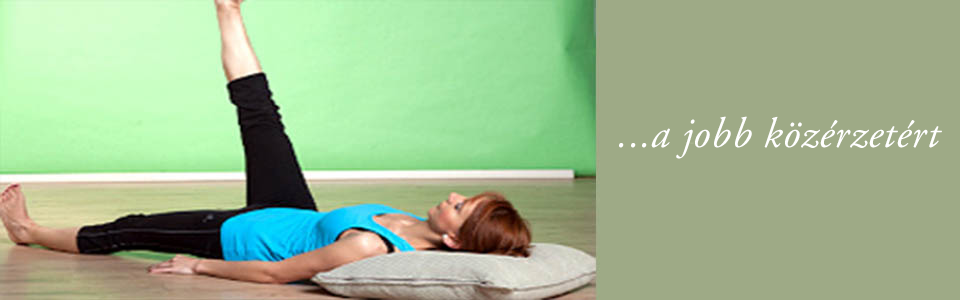
<style>
.page{position:relative;width:960px;height:300px;background:#9eaa86}
.page>*{position:absolute;margin:0}
.t1{font:42.4px "AGaramond-Italic";letter-spacing:0.015em;color:#ffffff}
</style>
<div class="page">
<p class="t1" style="left:619px;top:116px;width:323px;height:43px">...a jobb közérzetért</p>
</div>
